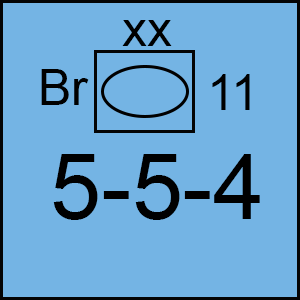
<style>
.page{position:relative;width:300px;height:300px;background:#74b4e4}
.page>*{position:absolute;margin:0}
.t1{font:50px "ArialMT";color:#000000}
.t2{font:91.7px "ArialMT";color:#000000}
</style>
<div class="page">
<p class="t1" style="left:122px;top:20px;width:50px;height:26px">xx</p>
<p class="t1" style="left:41px;top:69px;width:48px;height:36px">Br</p>
<p class="t1" style="left:212px;top:74px;width:38px;height:36px">11</p>
<p class="t2" style="left:53px;top:154px;width:207px;height:66px">5-5-4</p>
</div>
